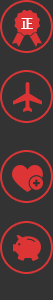
<style>
.page{position:relative;width:53px;height:300px;background:#333333}
.page>*{position:absolute;margin:0}
.t1{font:12px "MicrosoftYaHei-Bold";color:#ffffff}
</style>
<div class="page">
<p class="t1" style="left:21px;top:18px;width:12px;height:11px">正</p>
</div>
